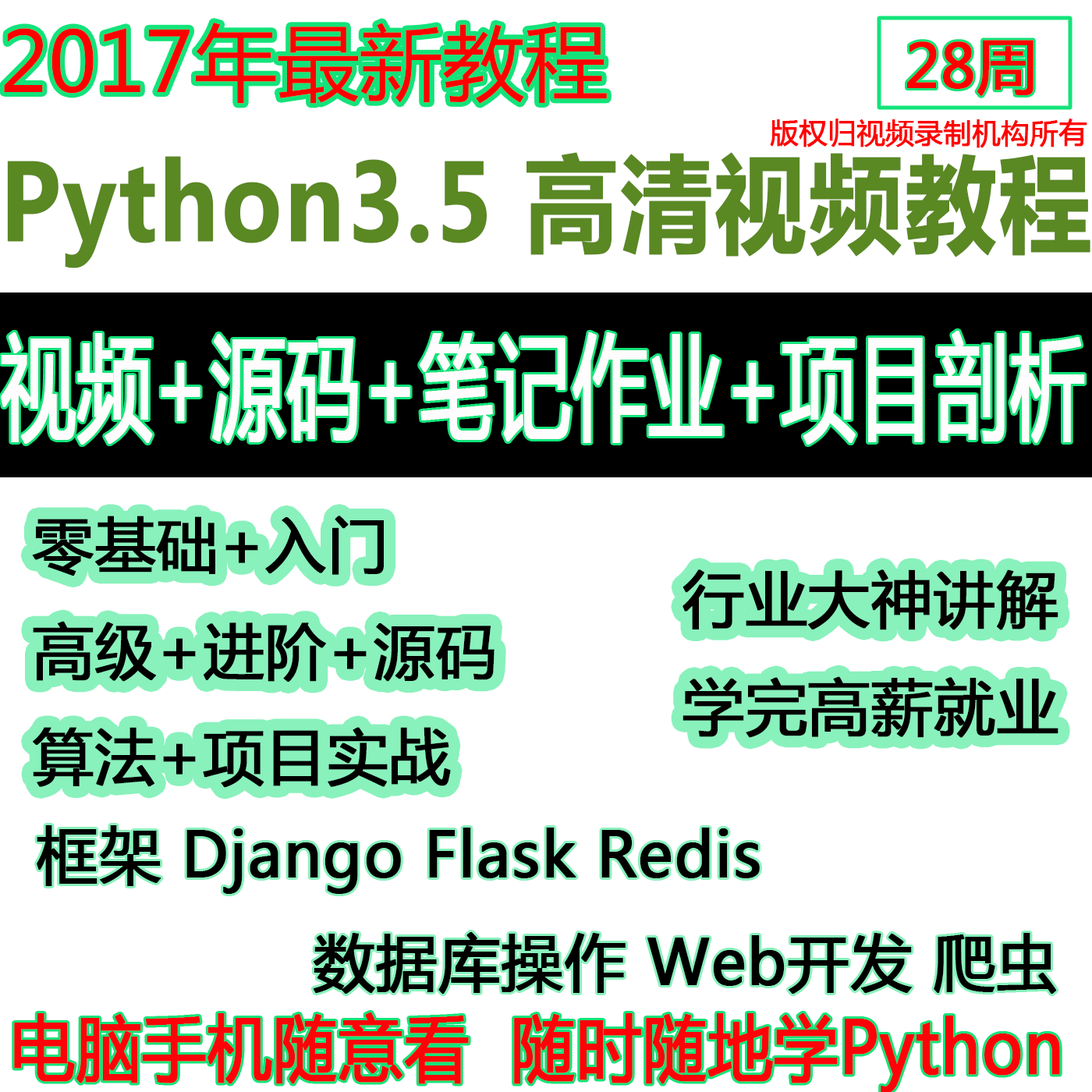
<style>
.page{position:relative;width:1092px;height:1092px;background:#ffffff}
.page>*{position:absolute;margin:0}
.t1{font:82.4px "MicrosoftYaHei";color:#fd0101}
.t2{font:59.6px "MicrosoftYaHei";color:#fe0000;font-weight:bold}
.t3{font:28.1px "MicrosoftYaHei";color:#ff0101;font-weight:bold}
.t4{font:105.2px "MicrosoftYaHei-Bold";color:#5a8823;font-weight:bold;scale:0.88 1}
.t5{font:113.6px "MicrosoftYaHei";color:#fefcfc;font-weight:bold;scale:0.65 1}
.t6{font:60.3px "MicrosoftYaHei";color:#000000;font-weight:bold}
.t7{font:61.1px "MicrosoftYaHei";color:#040000;font-weight:bold}
.t8{font:61.3px "MicrosoftYaHei";color:#010000;font-weight:bold}
.t9{font:71.4px "MicrosoftYaHei";color:#fd0309;font-weight:bold;scale:0.89 1}
</style>
<div class="page">
<p class="t1" style="left:4px;top:23px;width:603px;height:81px">2017年最新教程</p>
<p class="t2" style="left:907px;top:40px;width:126px;height:56px">28周</p>
<p class="t3" style="left:770px;top:119px;width:317px;height:29px">版权归视频录制机构所有</p>
<p class="t4" style="left:7px;top:152px;width:1083px;height:116px">Python3.5 高清视频教程</p>
<p class="t5" style="left:1px;top:331px;width:1084px;height:114px">视频+源码+笔记作业+项目剖析</p>
<p class="t6" style="left:32px;top:516px;width:463px;height:272px">零基础+入门<br>高级+进阶+源码<br>算法+项目实战</p>
<p class="t7" style="left:682px;top:569px;width:376px;height:169px">行业大神讲解<br>学完高薪就业</p>
<p class="t8" style="left:37px;top:825px;width:1019px;height:169px">框架 Django Flask Redis<br>              数据库操作 Web开发 爬虫</p>
<p class="t9" style="left:14px;top:1012px;width:1046px;height:82px">电脑手机随意看  随时随地学Python</p>
</div>
